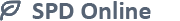
<style>
.page{position:relative;width:180px;height:21px;background:#ffffff}
.page>*{position:absolute;margin:0}
.t1{font:26px "Calibri-Bold";color:#566374}
</style>
<div class="page">
<p class="t1" style="left:32px;top:1px;width:119px;height:18px">SPD Online</p>
</div>
